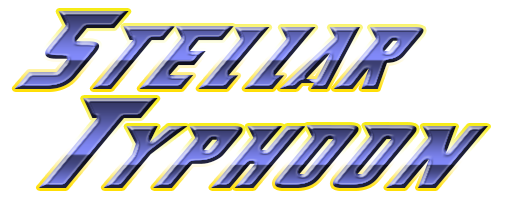
<style>
.page{position:relative;width:520px;height:200px;background:#ffffff}
.page>*{position:absolute;margin:0}
.t1{font:108px "Abberancy-Regular"}
.t2{font:124px "Abberancy-Regular"}
</style>
<div class="page">
<p class="t1" style="left:14px;top:11px;width:410px;height:78px">Stellar</p>
<p class="t2" style="left:38px;top:98px;width:120px;height:90px">T</p>
<p class="t1" style="left:103px;top:125px;width:386px;height:63px"><span class="t2"> </span>yphoon</p>
</div>
